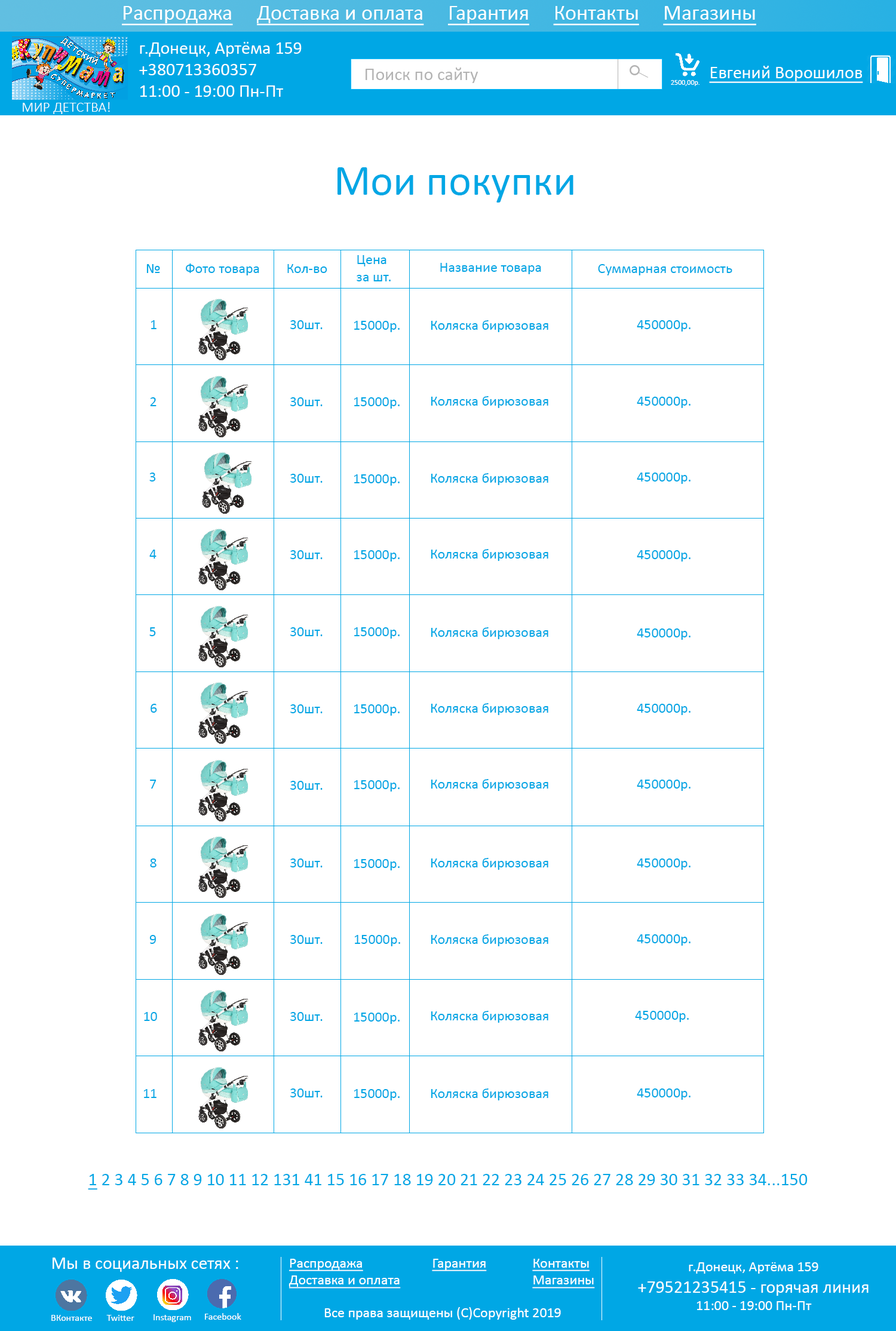
<style>
.page{position:relative;width:896px;height:1331px;background:#ffffff}
.page>*{position:absolute;margin:0}
.t1{font:21.5px "Calibri";color:#ffffff;text-decoration:underline}
.t2{font:17.9px "Calibri";color:#ffffff}
.t3{font:17.9px "Calibri";color:#ffffff;text-decoration:underline}
.t4{font:17.9px "Calibri";color:#b3b3b3}
.t5{font:7.2px "Calibri";color:#ffffff}
.t6{font:14.3px "Calibri-Light";color:#ffffff}
.t7{font:43px "Calibri";color:#00a7e5}
.t8{font:14.3px "Calibri";color:#00a7e5}
.t9{font:17.9px "Calibri";color:#00a7e5}
.t10{font:17.9px "Calibri";color:#00a7e5;text-decoration:underline}
.t11{font:14.3px "Calibri";color:#ffffff;text-decoration:underline}
.t12{font:14.3px "Calibri";color:#ffffff}
.t13{font:9.6px "Calibri";color:#ffffff}
</style>
<div class="page">
<p class="t1" style="left:122px;top:6px;width:634px;height:20px">Распродажа     Доставка и оплата     Гарантия     Контакты     Магазины</p>
<p class="t2" style="left:139px;top:42px;width:163px;height:55px">г.Донецк, Артёма 159<br>+380713360357<br>11:00 - 19:00 Пн-Пт</p>
<p class="t3" style="left:709px;top:66px;width:154px;height:17px">Евгений Ворошилов</p>
<p class="t4" style="left:366px;top:67px;width:112px;height:16px">Поиск по сайту</p>
<p class="t5" style="left:671px;top:80px;width:28px;height:6px">2500,00р.</p>
<p class="t6" style="left:23px;top:102px;width:87px;height:12px">МИР ДЕТСТВА!</p>
<p class="t7" style="left:337px;top:167px;width:236px;height:35px">Мои покупки</p>
<p class="t8" style="left:357px;top:255px;width:34px;height:26px">Цена <br>за шт.</p>
<p class="t8" style="left:146px;top:264px;width:14px;height:9px">№</p>
<p class="t8" style="left:186px;top:263px;width:73px;height:12px">Фото товара</p>
<p class="t8" style="left:287px;top:264px;width:40px;height:9px">Кол-во</p>
<p class="t8" style="left:440px;top:263px;width:101px;height:11px">Название товара</p>
<p class="t8" style="left:598px;top:264px;width:134px;height:11px">Суммарная стоимость</p>
<p class="t8" style="left:151px;top:320px;width:6px;height:9px">1</p>
<p class="t8" style="left:290px;top:320px;width:33px;height:9px">30шт.</p>
<p class="t8" style="left:354px;top:321px;width:46px;height:11px">15000р.</p>
<p class="t8" style="left:431px;top:320px;width:117px;height:12px">Коляска бирюзовая</p>
<p class="t8" style="left:637px;top:320px;width:54px;height:12px">450000р.</p>
<p class="t8" style="left:150px;top:397px;width:7px;height:9px">2</p>
<p class="t8" style="left:290px;top:397px;width:33px;height:9px">30шт.</p>
<p class="t8" style="left:354px;top:397px;width:46px;height:12px">15000р.</p>
<p class="t8" style="left:431px;top:396px;width:117px;height:12px">Коляска бирюзовая</p>
<p class="t8" style="left:637px;top:397px;width:54px;height:11px">450000р.</p>
<p class="t8" style="left:149px;top:472px;width:7px;height:9px">3</p>
<p class="t8" style="left:290px;top:474px;width:33px;height:9px">30шт.</p>
<p class="t8" style="left:431px;top:473px;width:117px;height:12px">Коляска бирюзовая</p>
<p class="t8" style="left:637px;top:472px;width:54px;height:12px">450000р.</p>
<p class="t8" style="left:354px;top:474px;width:46px;height:12px">15000р.</p>
<p class="t8" style="left:149px;top:550px;width:8px;height:9px">4</p>
<p class="t8" style="left:290px;top:550px;width:33px;height:9px">30шт.</p>
<p class="t8" style="left:354px;top:550px;width:46px;height:11px">15000р.</p>
<p class="t8" style="left:431px;top:549px;width:117px;height:12px">Коляска бирюзовая</p>
<p class="t8" style="left:637px;top:550px;width:54px;height:11px">450000р.</p>
<p class="t8" style="left:149px;top:627px;width:7px;height:9px">5</p>
<p class="t8" style="left:290px;top:627px;width:33px;height:9px">30шт.</p>
<p class="t8" style="left:354px;top:627px;width:46px;height:12px">15000р.</p>
<p class="t8" style="left:431px;top:627px;width:117px;height:12px">Коляска бирюзовая</p>
<p class="t8" style="left:637px;top:628px;width:54px;height:12px">450000р.</p>
<p class="t8" style="left:151px;top:704px;width:6px;height:9px">6</p>
<p class="t8" style="left:290px;top:704px;width:33px;height:9px">30шт.</p>
<p class="t8" style="left:354px;top:704px;width:46px;height:12px">15000р.</p>
<p class="t8" style="left:431px;top:703px;width:117px;height:12px">Коляска бирюзовая</p>
<p class="t8" style="left:637px;top:704px;width:54px;height:11px">450000р.</p>
<p class="t8" style="left:150px;top:780px;width:7px;height:8px">7</p>
<p class="t8" style="left:290px;top:781px;width:33px;height:9px">30шт.</p>
<p class="t8" style="left:354px;top:780px;width:46px;height:11px">15000р.</p>
<p class="t8" style="left:431px;top:779px;width:117px;height:12px">Коляска бирюзовая</p>
<p class="t8" style="left:637px;top:780px;width:54px;height:11px">450000р.</p>
<p class="t8" style="left:431px;top:858px;width:117px;height:12px">Коляска бирюзовая</p>
<p class="t8" style="left:150px;top:858px;width:7px;height:9px">8</p>
<p class="t8" style="left:290px;top:858px;width:33px;height:9px">30шт.</p>
<p class="t8" style="left:354px;top:859px;width:46px;height:11px">15000р.</p>
<p class="t8" style="left:637px;top:858px;width:54px;height:12px">450000р.</p>
<p class="t8" style="left:149px;top:935px;width:7px;height:9px">9</p>
<p class="t8" style="left:290px;top:935px;width:33px;height:9px">30шт.</p>
<p class="t8" style="left:354px;top:935px;width:46px;height:11px">15000р.</p>
<p class="t8" style="left:431px;top:934px;width:117px;height:12px">Коляска бирюзовая</p>
<p class="t8" style="left:637px;top:934px;width:54px;height:12px">450000р.</p>
<p class="t8" style="left:144px;top:1012px;width:13px;height:9px">10</p>
<p class="t8" style="left:290px;top:1012px;width:33px;height:9px">30шт.</p>
<p class="t8" style="left:354px;top:1012px;width:46px;height:12px">15000р.</p>
<p class="t8" style="left:431px;top:1011px;width:117px;height:12px">Коляска бирюзовая</p>
<p class="t8" style="left:635px;top:1011px;width:54px;height:11px">450000р.</p>
<p class="t8" style="left:143px;top:1089px;width:14px;height:9px">11</p>
<p class="t8" style="left:290px;top:1088px;width:33px;height:9px">30шт.</p>
<p class="t8" style="left:354px;top:1089px;width:46px;height:11px">15000р.</p>
<p class="t8" style="left:431px;top:1088px;width:117px;height:12px">Коляска бирюзовая</p>
<p class="t8" style="left:637px;top:1088px;width:54px;height:12px">450000р.</p>
<p class="t9" style="left:88px;top:1174px;width:720px;height:16px"><span class="t10">1</span> 2 3 4 5 6 7 8 9 10 11 12 131 41 15 16 17 18 19 20 21 22 23 24 25 26 27 28 29 30 31 32 33 34...150</p>
<p class="t2" style="left:53px;top:1257px;width:185px;height:15px">Мы в социальных сетях :</p>
<p class="t11" style="left:289px;top:1259px;width:112px;height:29px">Распродажа<br>Доставка и оплата</p>
<p class="t11" style="left:432px;top:1259px;width:55px;height:12px">Гарантия</p>
<p class="t11" style="left:532px;top:1259px;width:63px;height:29px">Контакты<br>Магазины</p>
<p class="t2" style="left:638px;top:1262px;width:231px;height:48px;text-align:center"><span class="t12">г.Донецк, Артёма 159<br></span>+79521235415 - горячая линия<br><span class="t12">11:00 - 19:00 Пн-Пт</span></p>
<p class="t13" style="left:205px;top:1313px;width:36px;height:7px">Facebook</p>
<p class="t12" style="left:324px;top:1307px;width:237px;height:13px">Все права защищены (С)Copyright 2019</p>
<p class="t13" style="left:51px;top:1315px;width:41px;height:6px">ВКонтакте</p>
<p class="t13" style="left:106px;top:1315px;width:28px;height:6px">Twitter</p>
<p class="t13" style="left:154px;top:1314px;width:37px;height:8px">Instagram</p>
</div>
